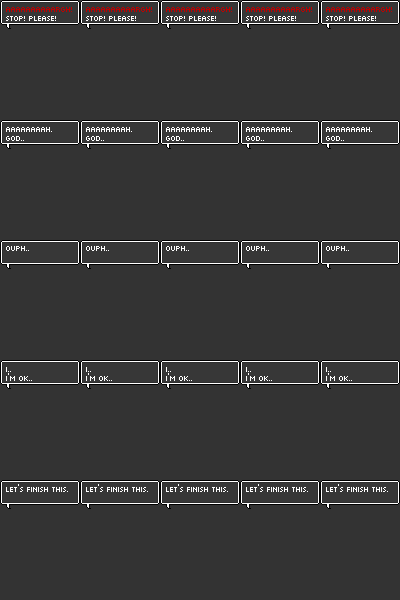
<style>
.page{position:relative;width:400px;height:600px;background:#333333}
.page>*{position:absolute;margin:0}
.t1{font:10px "MunroSmall";color:#c10000}
.t2{font:10px "MunroSmall";color:#ffffff}
</style>
<div class="page">
<p class="t1" style="left:6px;top:7px;width:66px;height:5px">Aaaaaaaaaargh!</p>
<p class="t2" style="left:6px;top:16px;width:50px;height:5px">stop! please!</p>
<p class="t2" style="left:6px;top:127px;width:46px;height:5px">Aaaaaaaah.</p>
<p class="t2" style="left:6px;top:136px;width:18px;height:5px">god..</p>
<p class="t2" style="left:6px;top:246px;width:23px;height:5px">ouph..</p>
<p class="t2" style="left:6px;top:367px;width:5px;height:5px">I..</p>
<p class="t2" style="left:6px;top:373px;width:26px;height:8px">I’m ok..</p>
<p class="t2" style="left:6px;top:484px;width:62px;height:8px">let’s finish this.</p>
</div>
